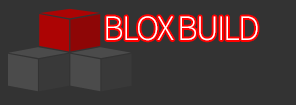
<style>
.page{position:relative;width:296px;height:105px;background:#333333}
.page>*{position:absolute;margin:0}
.t1{font:36px "SourceSansPro-Light";letter-spacing:-0.05em;color:#ffffff}
</style>
<div class="page">
<p class="t1" style="left:106px;top:16px;width:152px;height:25px">BLOX BUILD</p>
</div>
